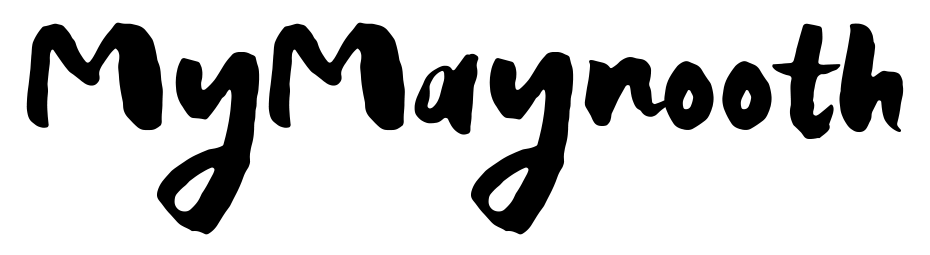
<style>
.page{position:relative;width:930px;height:255px;background:#ffffff}
.page>*{position:absolute;margin:0}
.t1{font:175px "RecklessSample";color:#000000}
</style>
<div class="page">
<p class="t1" style="left:26px;top:22px;width:878px;height:213px">MyMaynooth</p>
</div>
